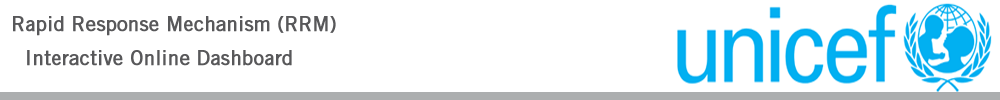
<style>
.page{position:relative;width:1000px;height:100px;background:#ffffff}
.page>*{position:absolute;margin:0}
.t1{font:20px "TradeGothicLTStd";color:#58585a;font-weight:bold}
</style>
<div class="page">
<p class="t1" style="left:13px;top:16px;width:323px;height:20px">Rapid Response Mechanism (RRM)</p>
<p class="t1" style="left:27px;top:50px;width:265px;height:16px">Interactive Online Dashboard</p>
</div>
